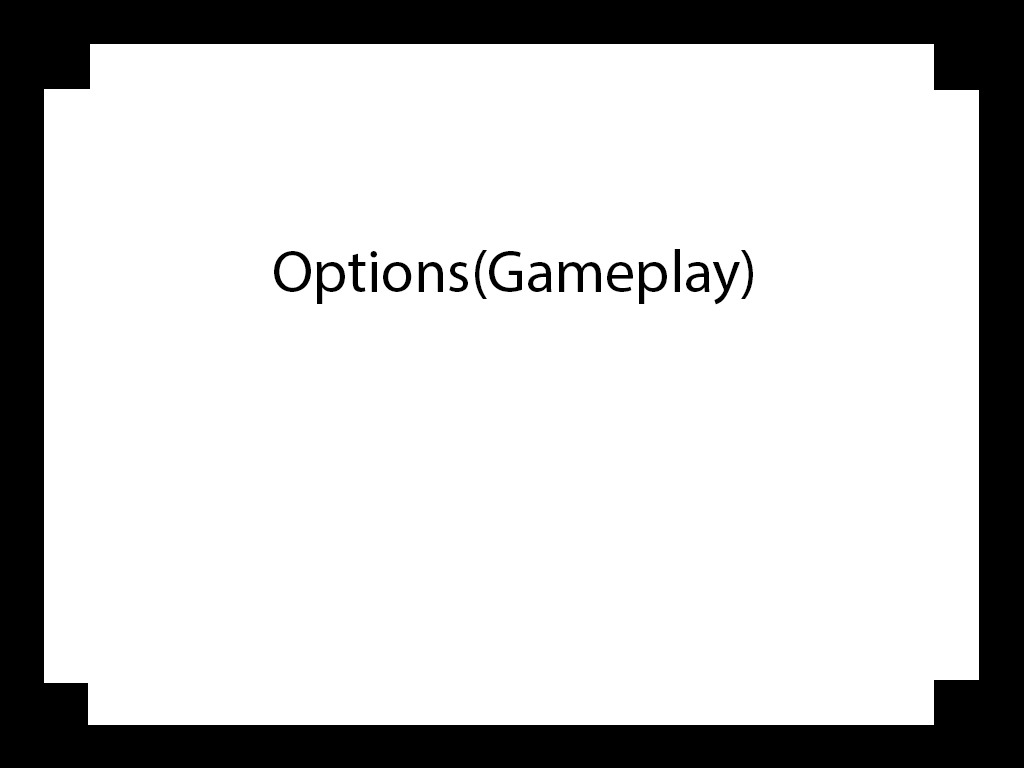
<style>
.page{position:relative;width:1024px;height:768px;background:#ffffff}
.page>*{position:absolute;margin:0}
.t1{font:60px "MyriadPro-Regular";color:#000000}
</style>
<div class="page">
<p class="t1" style="left:274px;top:249px;width:479px;height:56px">Options(Gameplay)</p>
</div>
